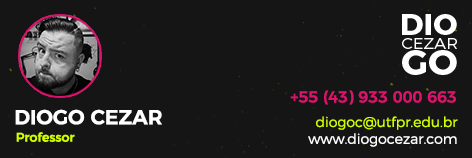
<style>
.page{position:relative;width:472px;height:158px;background:#151515}
.page>*{position:absolute;margin:0}
.t1{font:16px "Montserrat-Medium";color:#dc136d}
.t2{font:20.4px "Montserrat-SemiBold";color:#ffffff}
.t3{font:14px "Montserrat-Light";color:#d1fe00}
.t4{font:14px "Montserrat-Light";color:#ffffff}
.t5{font:12.6px "Montserrat-Medium";color:#d1fe00}
</style>
<div class="page">
<p class="t1" style="left:290px;top:90px;width:166px;height:15px">+55 (43) 933 000 663</p>
<p class="t2" style="left:15px;top:109px;width:147px;height:16px">DIOGO CEZAR</p>
<p class="t3" style="left:308px;top:116px;width:150px;height:31px;text-align:right">diogoc@utfpr.edu.br<br><span class="t4">www.diogocezar.com</span></p>
<p class="t5" style="left:16px;top:132px;width:59px;height:10px">Professor</p>
</div>
